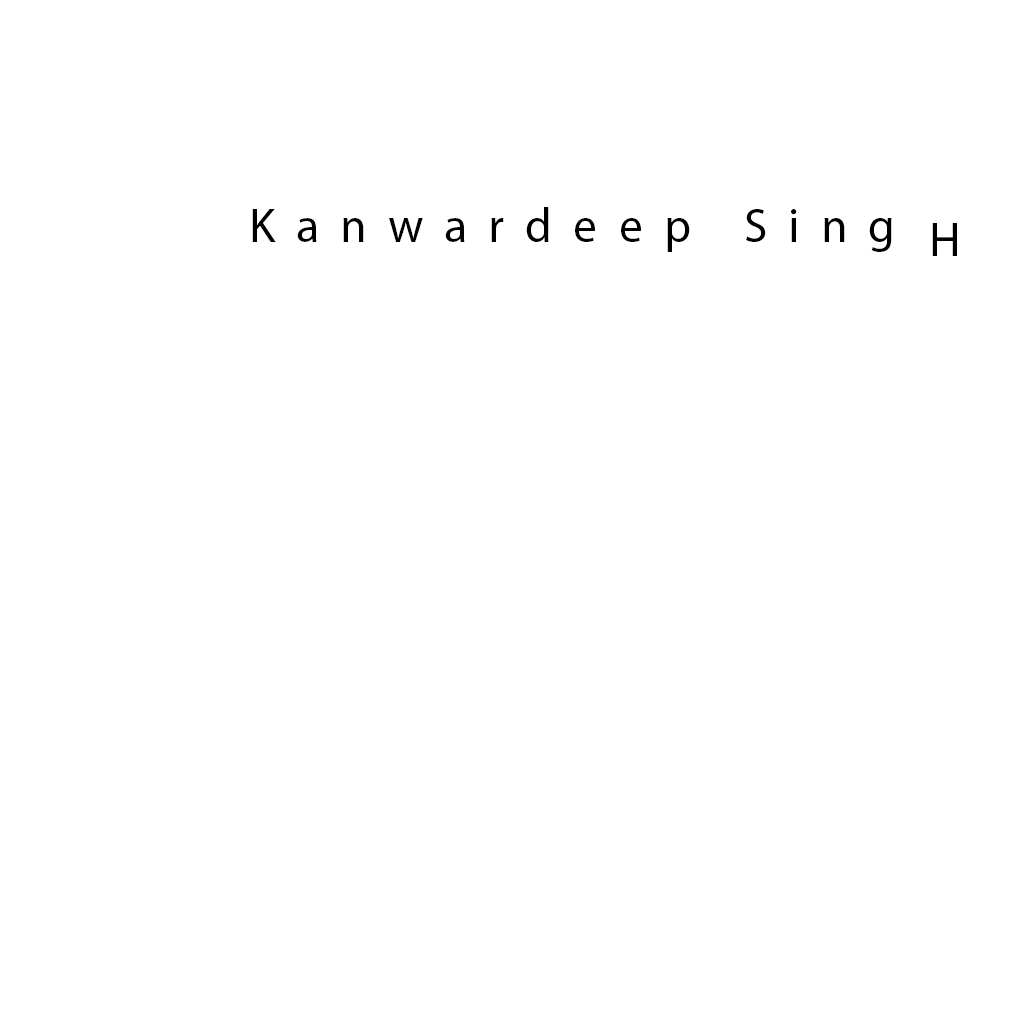
<style>
.page{position:relative;width:1024px;height:1024px;background:#ffffff}
.page>*{position:absolute;margin:0}
.t1{font:48px "MyriadPro-Regular";letter-spacing:0.44em;color:#000000}
</style>
<div class="page">
<p class="t1" style="left:252px;top:207px;width:640px;height:45px">Kanwardeep Sing</p>
<p class="t1" style="left:932px;top:223px;width:25px;height:33px">H</p>
</div>
